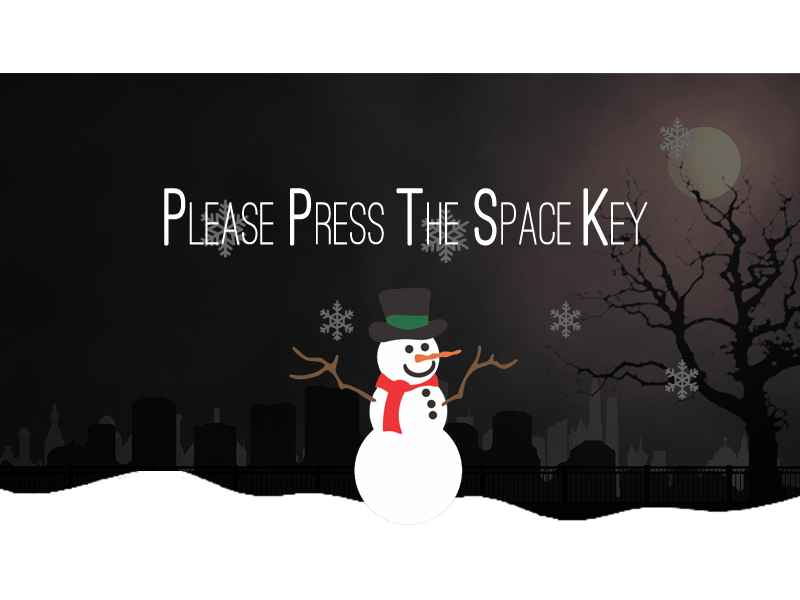
<style>
.page{position:relative;width:800px;height:600px;background:#ffffff}
.page>*{position:absolute;margin:0}
.t1{font:62.1px "OstrichSans-Medium";color:#ffffff;scale:0.85 1}
.t2{font:81.2px "OstrichSans-Medium";color:#ffffff;font-weight:bold;scale:0.85 1}
</style>
<div class="page">
<p class="t1" style="left:164px;top:188px;width:484px;height:58px"><span class="t2">P</span>lease <span class="t2">p</span>ress <span class="t2">t</span>he <span class="t2">S</span>pace <span class="t2">k</span>ey</p>
</div>
